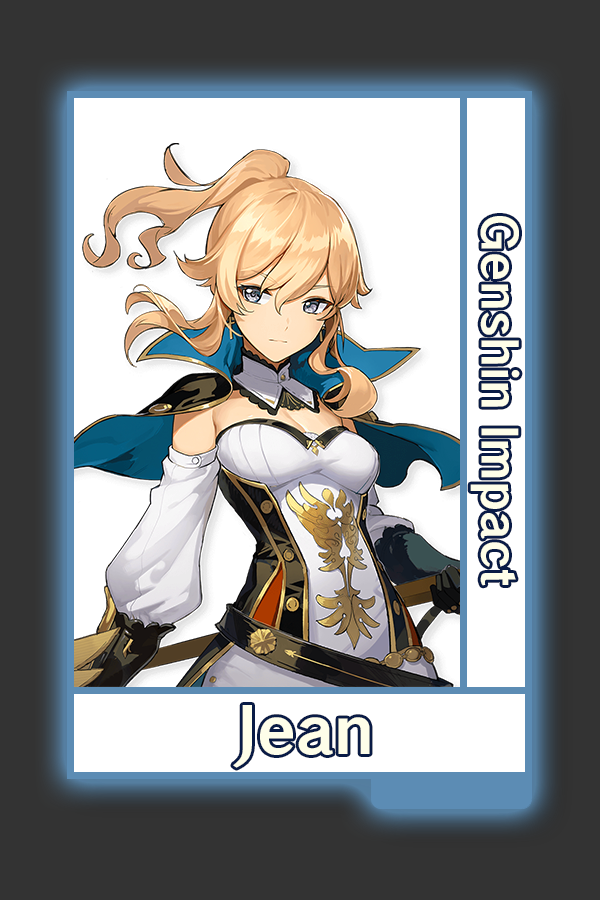
<style>
.page{position:relative;width:600px;height:900px;background:#ffffff}
.page>*{position:absolute;margin:0}
.t1{font:48.8px "HYWenHei-HEW";color:#fefef4}
.t2{font:65.2px "HYWenHei-HEW";color:#fefef4}
</style>
<div class="page">
<p class="t1" style="left:470px;top:216px;width:50px;height:370px;rotate:90deg">Genshin Impact</p>
<p class="t2" style="left:233px;top:705px;width:137px;height:63px">Jean</p>
</div>
